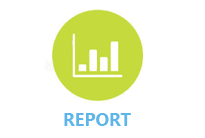
<style>
.page{position:relative;width:205px;height:138px;background:#ffffff}
.page>*{position:absolute;margin:0}
.t1{font:18px "NirmalaUI-Bold";color:#5eb5ea}
</style>
<div class="page">
<p class="t1" style="left:64px;top:113px;width:67px;height:13px">REPORT</p>
</div>
